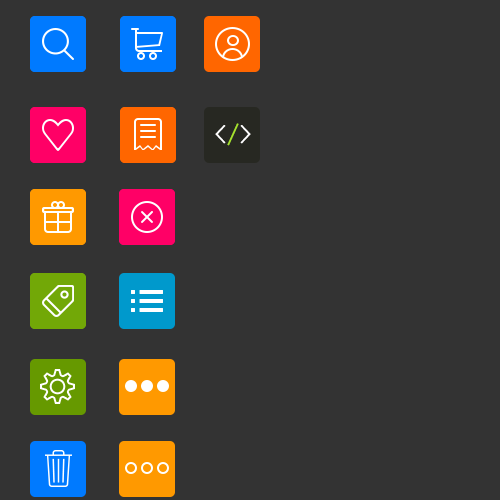
<style>
.page{position:relative;width:500px;height:500px;background:#333333}
.page>*{position:absolute;margin:0}
.t1{font:25.2px "LiSu";color:#ffffff;font-weight:bold;scale:0.95 1}
.t2{font:25.2px "LiSu";color:#a6e22e;font-weight:bold;scale:0.95 1}
</style>
<div class="page">
<p class="t1" style="left:215px;top:123px;width:36px;height:23px">&lt;<span class="t2">/</span>&gt;</p>
</div>
